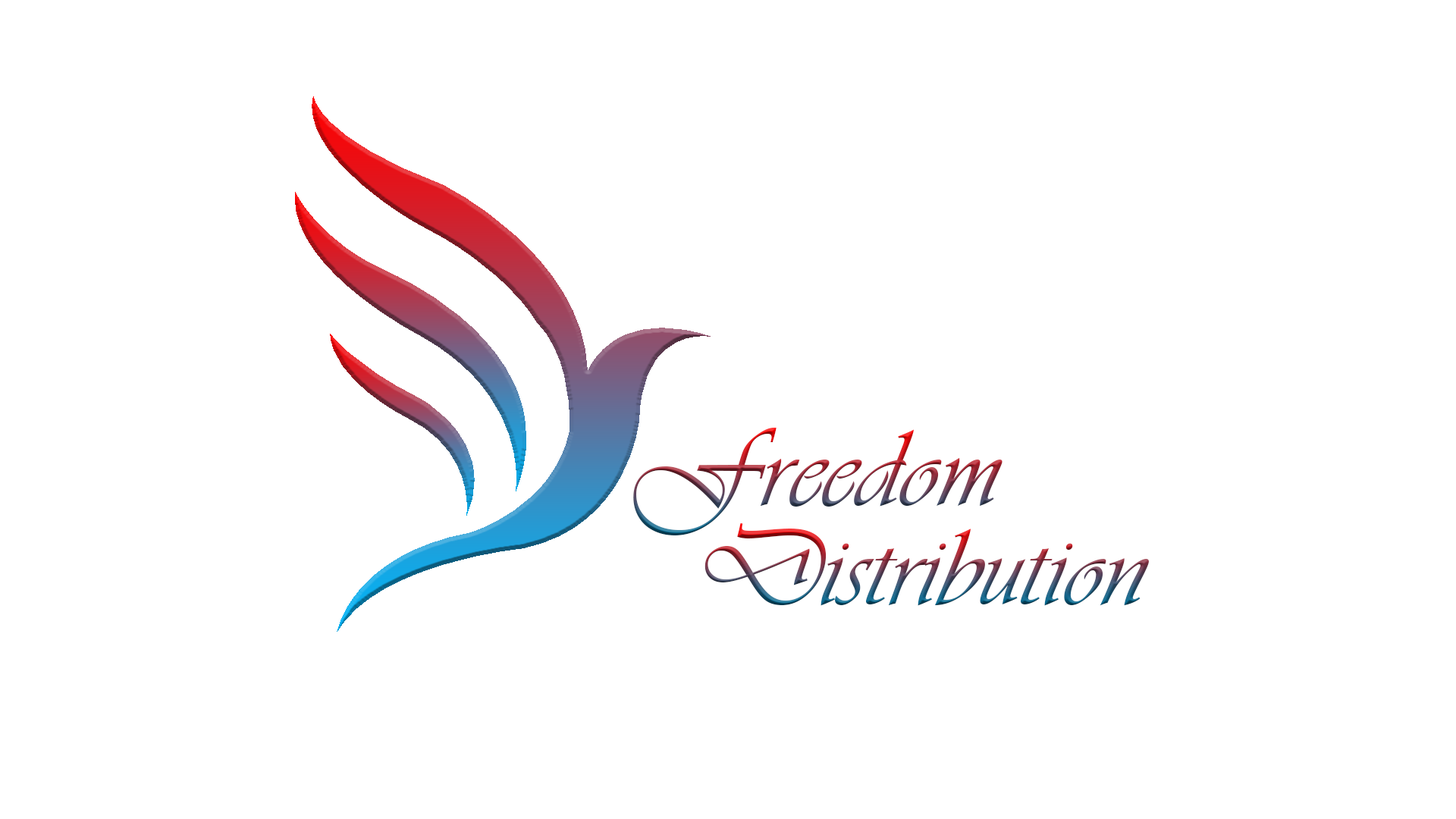
<style>
.page{position:relative;width:1456px;height:819px;background:#ffffff}
.page>*{position:absolute;margin:0}
.t1{font:113.7px "Vivaldii"}
</style>
<div class="page">
<p class="t1" style="left:633px;top:427px;width:370px;height:108px">Freedom</p>
<p class="t1" style="left:704px;top:522px;width:445px;height:84px">Distribution</p>
</div>
